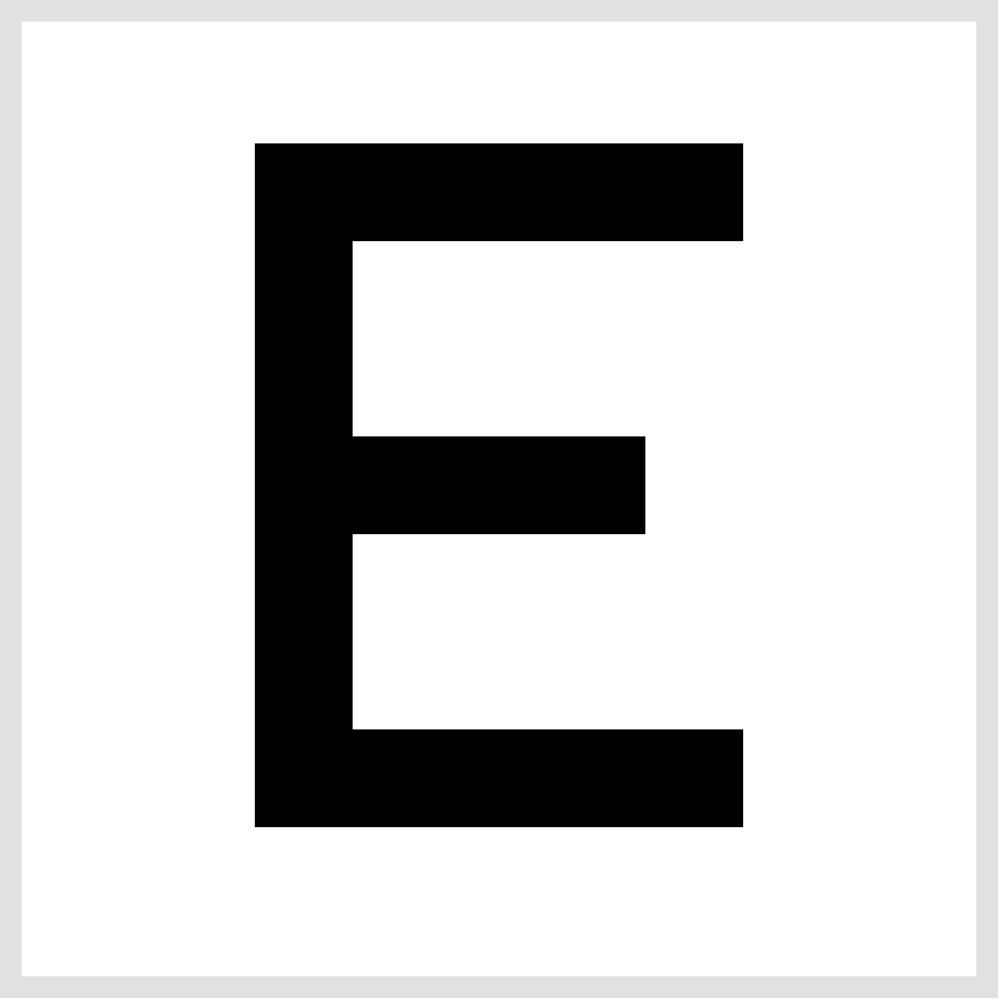
<style>
.page{position:relative;width:1000px;height:1000px;background:#ffffff}
.page>*{position:absolute;margin:0}
.t1{font:1000px "VCROSDMono";color:#000000}
</style>
<div class="page">
<p class="t1" style="left:254px;top:143px;width:490px;height:685px">E</p>
</div>
